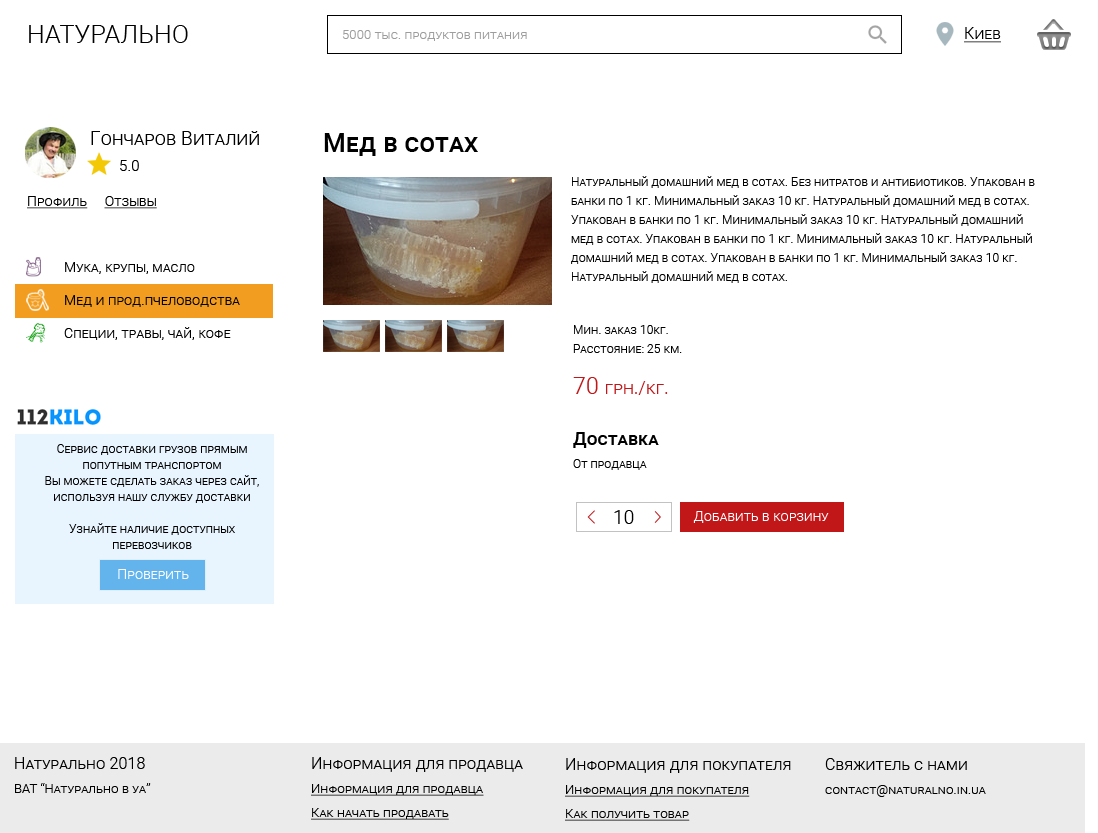
<style>
.page{position:relative;width:1098px;height:833px;background:#ffffff}
.page>*{position:absolute;margin:0}
.t1{font:25px "Roboto-Light";letter-spacing:0.01em;color:#000000;font-variant:small-caps}
.t2{font:13px "Roboto-Light";letter-spacing:0.01em;color:#9d9d9d;font-variant:small-caps}
.t3{font:16px "Roboto-Light";letter-spacing:0.01em;color:#000000;font-variant:small-caps;text-decoration:underline}
.t4{font:19px "Roboto-Light";letter-spacing:0.01em;color:#000000;font-variant:small-caps}
.t5{font:26px "Roboto-Medium";letter-spacing:0.01em;color:#000000;font-variant:small-caps}
.t6{font:15px "Roboto-Light";letter-spacing:0.01em;color:#000000;font-variant:small-caps}
.t7{font:12px/19px "Roboto-Light";letter-spacing:0.01em;color:#000000;font-variant:small-caps}
.t8{font:12px/33px "Roboto-Light";letter-spacing:0.01em;color:#000000;font-variant:small-caps}
.t9{font:14px "Roboto-Light";letter-spacing:0.01em;color:#000000;font-variant:small-caps;text-decoration:underline}
.t10{font:14px/33px "Roboto-Light";letter-spacing:0.01em;color:#000000;font-variant:small-caps}
.t11{font:18px "Roboto-Light";letter-spacing:0.01em;color:#c21719;font-variant:small-caps}
.t12{font:23px "Roboto-Light";letter-spacing:0.01em;color:#c21719;font-variant:small-caps}
.t13{font:12px/23px "Roboto-Light";letter-spacing:0.01em;color:#000000;font-variant:small-caps}
.t14{font:18px/19px "Roboto-Medium";letter-spacing:0.01em;color:#000000;font-variant:small-caps}
.t15{font:12px/16px "Roboto-Light";letter-spacing:0.01em;color:#000000;font-variant:small-caps}
.t16{font:14px "Roboto-Light";letter-spacing:0.01em;color:#ffffff;font-variant:small-caps}
.t17{font:13px/24px "Roboto-Light";letter-spacing:0.01em;color:#000000;font-variant:small-caps}
.t18{font:16px/26px "Roboto-Light";letter-spacing:0.01em;color:#000000;font-variant:small-caps}
.t19{font:13px/24px "Roboto-Light";letter-spacing:0.01em;color:#000000;font-variant:small-caps;text-decoration:underline}
</style>
<div class="page">
<p class="t1" style="left:29px;top:25px;width:159px;height:18px">НАТУРАЛЬНО</p>
<p class="t2" style="left:342px;top:30px;width:185px;height:11px">5000 тыс. продуктов питания</p>
<p class="t3" style="left:964px;top:27px;width:37px;height:16px">Киев</p>
<p class="t4" style="left:91px;top:131px;width:168px;height:14px">Гончаров Виталий</p>
<p class="t5" style="left:324px;top:133px;width:154px;height:23px">Мед в сотах</p>
<p class="t6" style="left:120px;top:160px;width:19px;height:11px">5.0</p>
<p class="t7" style="left:571px;top:176px;width:464px;height:107px"><span class="t8">Натуральный</span> домашний мед в сотах. Без нитратов и антибиотиков. Упакован в банки по 1 кг. Минимальный заказ 10 кг. Натуральный домашний мед в сотах. Упакован в банки по 1 кг. Минимальный заказ 10 кг. Натуральный домашний мед в сотах. Упакован в банки по 1 кг. Минимальный заказ 10 кг. Натуральный домашний мед в сотах. Упакован в банки по 1 кг. Минимальный заказ 10 кг. Натуральный домашний мед в сотах.</p>
<p class="t9" style="left:27px;top:196px;width:130px;height:13px">Профиль     Отзывы</p>
<p class="t10" style="left:64px;top:262px;width:176px;height:78px">Мука, крупы, масло<br>Мед и прод.пчеловодства<br>Специи, травы, чай, кофе</p>
<p class="t7" style="left:573px;top:325px;width:109px;height:28px">Мин. заказ 10кг.<br>Расстояние: 25 км.</p>
<p class="t11" style="left:573px;top:377px;width:95px;height:18px"><span class="t12">70 </span>грн./кг.</p>
<p class="t13" style="left:573px;top:432px;width:86px;height:38px"><span class="t14">Доставка<br></span>От продавца</p>
<p class="t15" style="left:45px;top:444px;width:214px;height:105px;text-align:center">Сервис доставки грузов прямым попутным транспортом<br>Вы можете сделать заказ через сайт, используя нашу службу доставки<br><br>Узнайте наличие доступных перевозчиков</p>
<p class="t4" style="left:614px;top:510px;width:20px;height:14px">10</p>
<p class="t16" style="left:693px;top:511px;width:136px;height:12px">Добавить в корзину</p>
<p class="t16" style="left:118px;top:569px;width:71px;height:10px">Проверить</p>
<p class="t17" style="left:15px;top:757px;width:136px;height:36px"><span class="t18">Натурально 2018<br></span>ВАТ “Натурально в уа”</p>
<p class="t19" style="left:311px;top:757px;width:212px;height:63px"><span class="t18">Информация для продавца<br></span>Информация для продавца<br>Как начать продавать</p>
<p class="t19" style="left:565px;top:758px;width:226px;height:63px"><span class="t18">Информация для покупателя<br></span>Информация для покупателя<br>Как получить товар</p>
<p class="t17" style="left:825px;top:758px;width:161px;height:39px"><span class="t18">Свяжитель с нами<br></span>contact@naturalno.in.ua</p>
</div>
